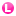
<style>
.page{position:relative;width:16px;height:16px;background:#ffffff}
.page>*{position:absolute;margin:0}
.t1{font:10.6px "HelveticaNeueLTStd-Hv";letter-spacing:0.01em;color:#ffffff}
</style>
<div class="page">
<p class="t1" style="left:5px;top:4px;width:6px;height:8px">L</p>
</div>
